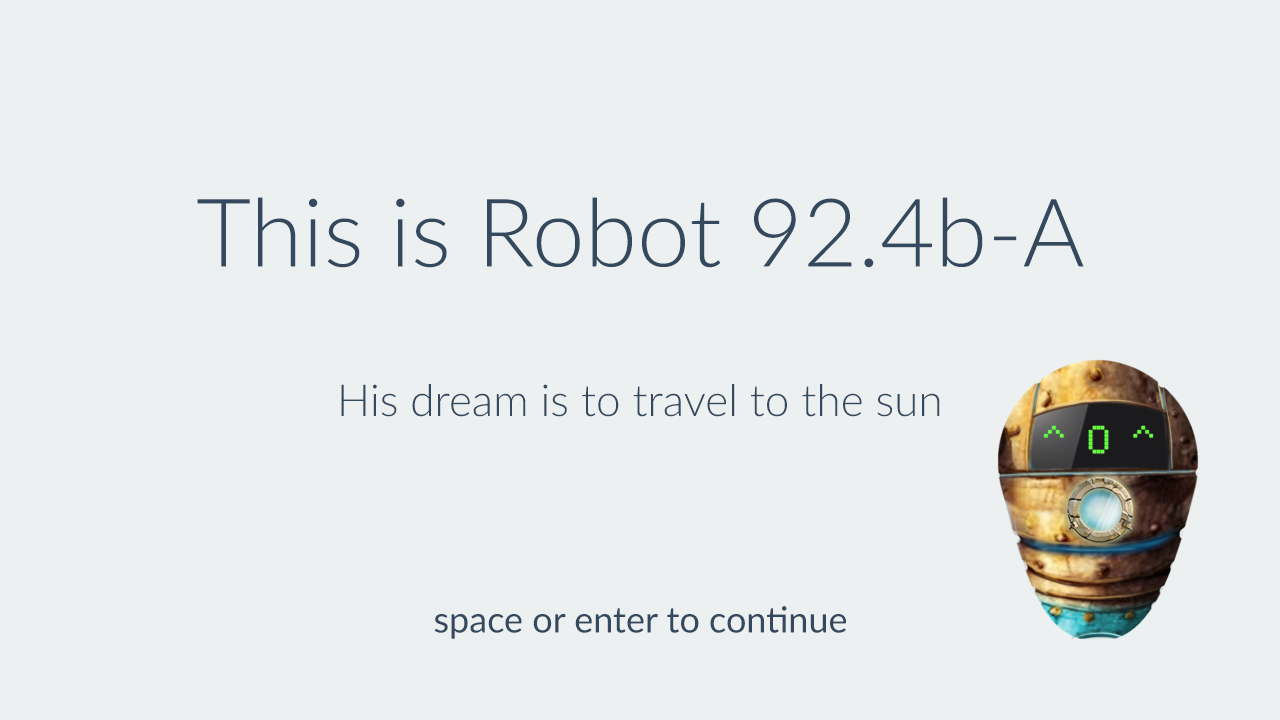
<style>
.page{position:relative;width:1280px;height:720px;background:#ecf0f1}
.page>*{position:absolute;margin:0}
.t1{font:95px "Lato-Light";color:#34495e}
.t2{font:44px "Lato-Light";color:#34495e}
.t3{font:36px "Lato-Regular";color:#34495e}
</style>
<div class="page">
<p class="t1" style="left:197px;top:197px;width:887px;height:71px">This is Robot 92.4b-A</p>
<p class="t2" style="left:341px;top:384px;width:599px;height:33px">His dream is to travel to the sun</p>
<p class="t3" style="left:434px;top:606px;width:412px;height:33px">space or enter to continue</p>
</div>
